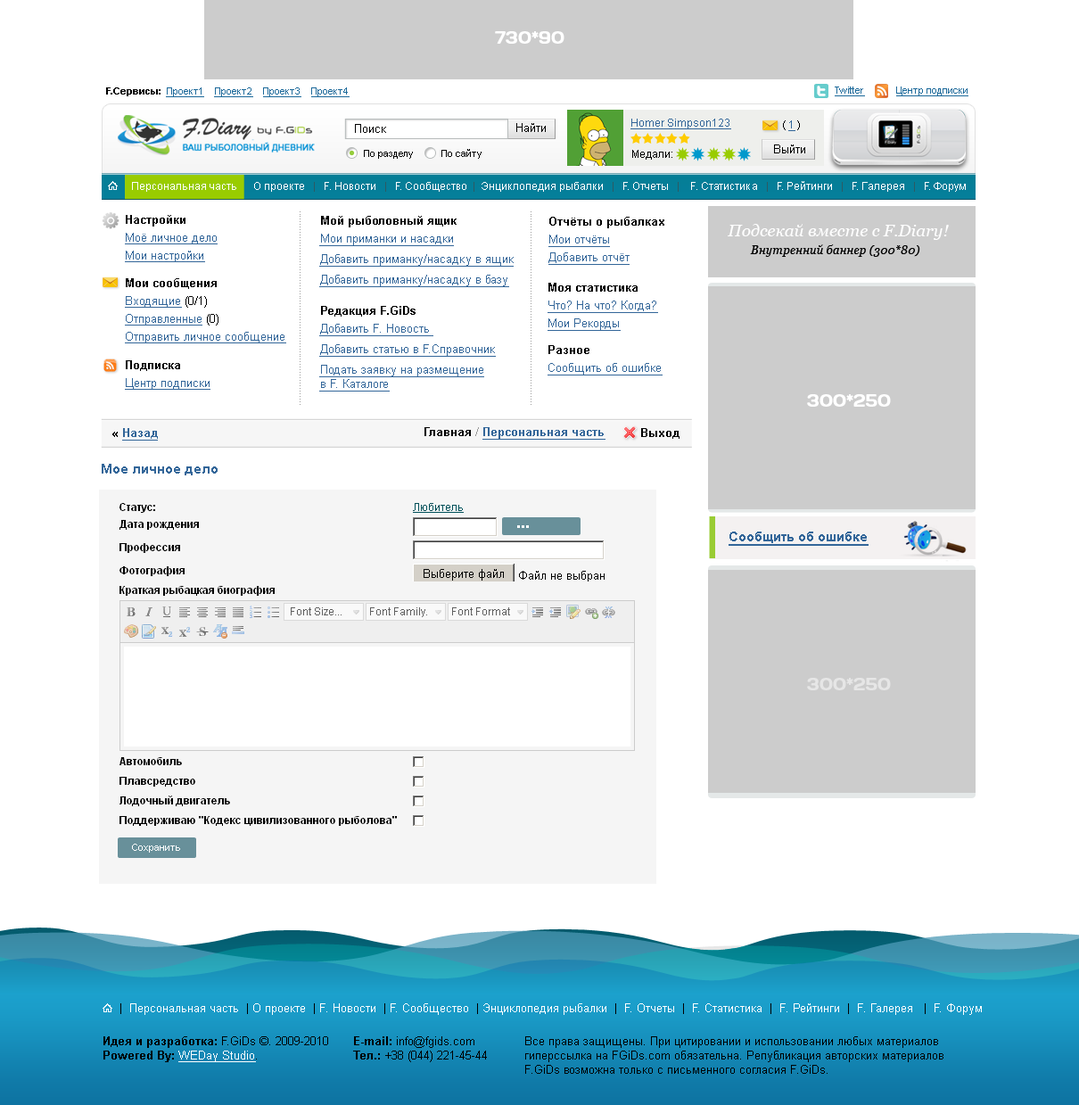
<style>
.page{position:relative;width:1079px;height:1105px;background:#ffffff}
.page>*{position:absolute;margin:0}
.t1{font:16.9px "Days";color:#ffffff}
.t2{font:9.8px "ArialMT";color:#1c699a;text-decoration:underline}
.t3{font:9.8px "Arial-BoldMT";color:#000000}
.t4{font:11.6px "ArialMT";color:#000000}
.t5{font:10.7px "ArialMT";color:#336699;text-decoration:underline}
.t6{font:10.7px "ArialMT";color:#000000}
.t7{font:9.8px "ArialMT";color:#000000}
.t8{font:10.7px "ArialMT";color:#ffffff}
.t9{font:10.7px "ArialMT";color:#2d5a63}
.t10{font:11.6px/17.8px "ArialMT";color:#336699;text-decoration:underline}
.t11{font:11.6px/17.8px "Arial-BoldMT";color:#000000}
.t12{font:11.6px/30.3px "Arial-BoldMT";color:#000000}
.t13{font:11.6px/20.5px "ArialMT";color:#336699;text-decoration:underline}
.t14{font:11.6px/14.3px "ArialMT";color:#336699;text-decoration:underline}
.t15{font:11.6px/13.4px "ArialMT";color:#336699;text-decoration:underline}
.t16{font:11.6px/31.2px "Arial-BoldMT";color:#000000}
.t17{font:16.9px "Georgia-Italic";color:#fefefe}
.t18{font:12px/17.6px "Georgia-Italic";color:#000000}
.t19{font:11.6px/26.8px "Arial-BoldMT";color:#000000}
.t20{font:11.6px/17.8px "ArialMT";color:#000000}
.t21{font:11.6px/33.9px "Arial-BoldMT";color:#000000}
.t22{font:11.6px/29.4px "Arial-BoldMT";color:#000000}
.t23{font:11.6px "Arial-BoldMT";color:#336699;text-decoration:underline}
.t24{font:11.6px "Arial-BoldMT";color:#000000}
.t25{font:11.6px "Arial-BoldMT";color:#999999}
.t26{font:13.4px "Arial-BoldMT";color:#336699}
.t27{font:16.1px "Arial-BoldMT";color:#ffffff}
.t28{font:13.4px "Arial-BoldMT";color:#336699;text-decoration:underline}
.t29{font:16.9px "Days";color:#e6e6e6}
.t30{font:9.8px "ArialMT";color:#ffffff}
.t31{font:11.6px "ArialMT";color:#ffffff}
.t32{font:11.6px "ArialMT";color:#ffffff;text-decoration:underline}
</style>
<div class="page">
<p class="t1" style="left:495px;top:31px;width:70px;height:13px">730*90</p>
<p class="t2" style="left:106px;top:87px;width:244px;height:10px"><span class="t3">F.Сервисы:  </span>Проект1    Проект2    Проект3    Проект4</p>
<p class="t2" style="left:835px;top:87px;width:30px;height:9px">Twitter</p>
<p class="t2" style="left:896px;top:87px;width:73px;height:9px">Центр подписки</p>
<p class="t4" style="left:355px;top:124px;width:31px;height:9px">Поиск</p>
<p class="t4" style="left:516px;top:123px;width:30px;height:9px">Найти</p>
<p class="t5" style="left:631px;top:119px;width:100px;height:10px">Homer Simpson123</p>
<p class="t6" style="left:783px;top:120px;width:17px;height:11px">( <span class="t5">1</span> )</p>
<p class="t7" style="left:364px;top:150px;width:49px;height:9px">По разделу</p>
<p class="t7" style="left:441px;top:149px;width:41px;height:10px">По сайту</p>
<p class="t6" style="left:632px;top:150px;width:40px;height:10px">Медали:</p>
<p class="t4" style="left:774px;top:144px;width:31px;height:9px">Выйти</p>
<p class="t8" style="left:132px;top:181px;width:834px;height:11px">Персональная часть      О проекте   <span class="t9">|</span>   F. Новости   <span class="t9">|</span>   F. Сообщество <span class="t9"> |</span>  Энциклопедия рыбалки  <span class="t9"> |</span>   F. Отчеты   <span class="t9">| </span>   F. Статистика   <span class="t9">|</span>   F. Рейтинги   <span class="t9">| </span>  F. Галерея   <span class="t9">|</span>   F. Форум</p>
<p class="t10" style="left:125px;top:215px;width:93px;height:47px"><span class="t11">Настройки<br></span>Моё личное дело<br>Мои настройки</p>
<p class="t10" style="left:319px;top:216px;width:195px;height:71px"><span class="t12">Мой рыболовный ящик<br></span>Мои приманки и насадки<br><span class="t13">Д</span>обавить приманку/насадку <span class="t14">в ящик<br></span><span class="t13">Д</span>обавить приманку/насадку <span class="t15">в базу</span></p>
<p class="t10" style="left:548px;top:217px;width:116px;height:48px"><span class="t16">Отчёты о рыбалках<br></span>Мои отчёты<br>Добавить отчёт</p>
<p class="t17" style="left:728px;top:224px;width:221px;height:33px;text-align:center">Подсекай вместе с F.Diary!<br><span class="t18">Внутренний баннер (300*80)</span></p>
<p class="t10" style="left:125px;top:278px;width:161px;height:65px"><span class="t19">Мои сообщения<br></span>Входящие <span class="t20">(0/1)<br></span>Отправленные<span class="t20"> (0)<br></span>Отправить личное сообщение</p>
<p class="t10" style="left:548px;top:283px;width:115px;height:92px"><span class="t19">Моя статистика<br></span>Что? На что? Когда?<br>Мои Рекорды<br><span class="t19">Разное<br></span>Сообщить об ошибке</p>
<p class="t10" style="left:319px;top:306px;width:177px;height:86px"><span class="t21">Редакция F.GiDs<br></span>Добавить F. Новость <br><span class="t13">Д</span>обавить статью в F.<span class="t14">Cправочник<br></span><span class="t13">По</span>дать заявку на размещение<br><span class="t14">в F. Каталоге</span></p>
<p class="t10" style="left:125px;top:360px;width:85px;height:30px"><span class="t22">Подписка<br></span>Центр подписки</p>
<p class="t1" style="left:807px;top:394px;width:84px;height:13px">300*250</p>
<p class="t23" style="left:112px;top:428px;width:46px;height:13px"><span class="t24"> « </span>Назад</p>
<p class="t23" style="left:425px;top:427px;width:181px;height:13px"><span class="t24"> Главная </span><span class="t25">/ </span>Персональная часть</p>
<p class="t24" style="left:641px;top:428px;width:39px;height:11px">Выход</p>
<p class="t26" style="left:102px;top:464px;width:116px;height:11px">Мое личное дело</p>
<p class="t27" style="left:517px;top:525px;width:12px;height:3px">...</p>
<p class="t28" style="left:729px;top:532px;width:140px;height:14px">Сообщить об ошибке</p>
<p class="t29" style="left:807px;top:678px;width:84px;height:12px">300*250</p>
<p class="t30" style="left:132px;top:844px;width:48px;height:9px">Сохранить</p>
<p class="t31" style="left:120px;top:1003px;width:862px;height:12px"><span class="t4">|</span>  Персональная часть <span class="t4"> |</span> О проекте  <span class="t4">|</span> F. Новости  <span class="t4">|</span> F. Сообщество  <span class="t4">|</span> Энциклопедия рыбалки  <span class="t4">|</span>  F. Отчеты  <span class="t4">|</span>  F. Статистика  <span class="t4">|</span>  F. Рейтинги  <span class="t4">|</span>  F. Галерея   <span class="t4">|</span>  F. Форум</p>
<p class="t4" style="left:103px;top:1036px;width:225px;height:26px"><span class="t24">Идея и разработка:</span> F.GiDs ©. 2009-2010<br><span class="t24">Powered By: </span><span class="t32">WEDay Studio</span>.</p>
<p class="t4" style="left:353px;top:1036px;width:134px;height:26px"><span class="t24">E-mail: </span>info@fgids.com<br><span class="t24">Тел.:</span> +38 (044) 221-45-44</p>
<p class="t4" style="left:525px;top:1036px;width:419px;height:38px">Все права защищены. При цитировании и использовании любых материалов гиперссылка на FGiDs.com обязательна. Републикация авторских материалов F.GiDs возможна только с письменного согласия F.GiDs.</p>
</div>
